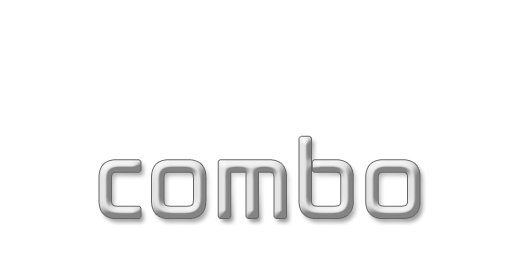
<style>
.page{position:relative;width:512px;height:256px;background:#ffffff}
.page>*{position:absolute;margin:0}
.t1{font:107px "ZektonRg-Regular";font-weight:bold}
</style>
<div class="page">
<p class="t1" style="left:99px;top:136px;width:321px;height:82px">combo</p>
</div>
